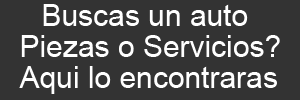
<style>
.page{position:relative;width:300px;height:100px;background:#333333}
.page>*{position:absolute;margin:0}
.t1{font:30px "ArialMT";color:#ffffff}
</style>
<div class="page">
<p class="t1" style="left:43px;top:4px;width:205px;height:22px">Buscas un auto</p>
<p class="t1" style="left:21px;top:35px;width:259px;height:22px">Piezas o Servicios?</p>
<p class="t1" style="left:19px;top:66px;width:258px;height:28px">Aqui lo encontraras</p>
</div>
